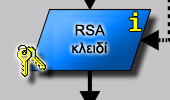
<style>
.page{position:relative;width:170px;height:100px;background:#c6c3c6}
.page>*{position:absolute;margin:0}
.t1{font:14.7px "ArialMT";color:#000000}
</style>
<div class="page">
<p class="t1" style="left:72px;top:24px;width:36px;height:30px;text-align:center">RSA<br>κλειδί</p>
</div>
